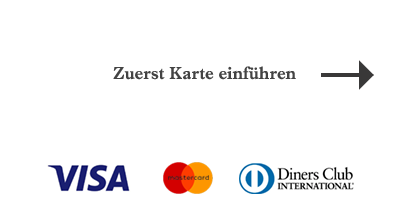
<style>
.page{position:relative;width:399px;height:201px;background:#ffffff}
.page>*{position:absolute;margin:0}
.t1{font:18px "URWImprintW01-Bold";color:#434343}
</style>
<div class="page">
<p class="t1" style="left:113px;top:66px;width:183px;height:14px">Zuerst Karte einführen</p>
</div>
